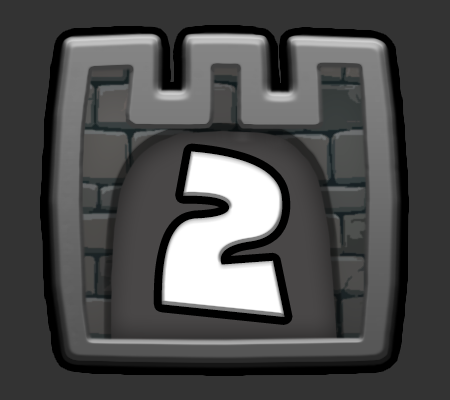
<style>
.page{position:relative;width:450px;height:400px;background:#333333}
.page>*{position:absolute;margin:0}
.t1{font:199.6px "Funhouse";color:#ffffff}
</style>
<div class="page">
<p class="t1" style="left:161px;top:151px;width:124px;height:166px">2</p>
</div>
